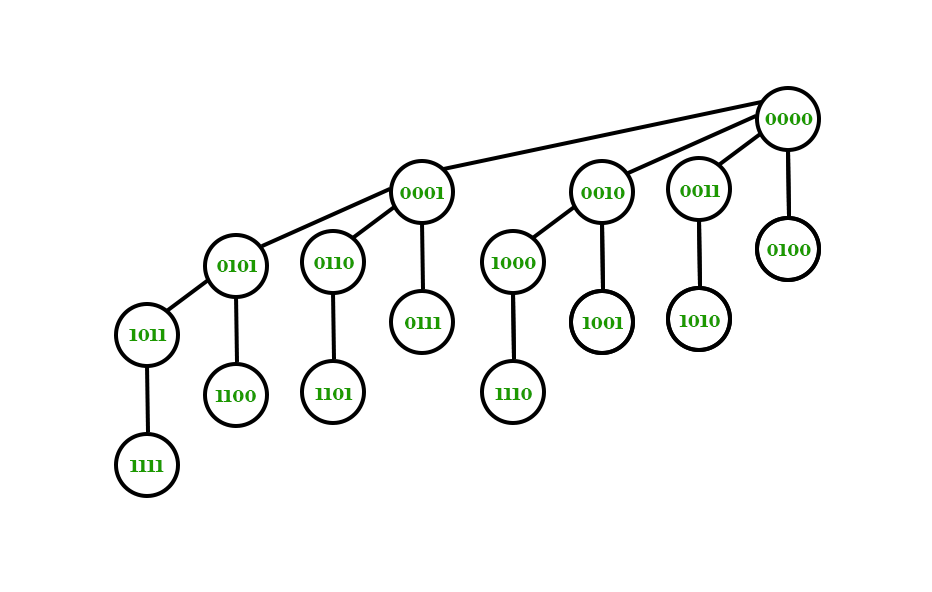
<style>
.page{position:relative;width:932px;height:592px;background:#ffffff}
.page>*{position:absolute;margin:0}
.t1{font:16px "Elephant-Regular";color:#1d9900}
</style>
<div class="page">
<p class="t1" style="left:765px;top:113px;width:48px;height:12px">0000</p>
<p class="t1" style="left:680px;top:185px;width:40px;height:12px">0011</p>
<p class="t1" style="left:400px;top:187px;width:44px;height:12px">0001</p>
<p class="t1" style="left:581px;top:187px;width:44px;height:12px">0010</p>
<p class="t1" style="left:767px;top:244px;width:44px;height:12px">0100</p>
<p class="t1" style="left:314px;top:257px;width:40px;height:12px">0110</p>
<p class="t1" style="left:491px;top:257px;width:45px;height:12px">1000</p>
<p class="t1" style="left:217px;top:260px;width:40px;height:12px">0101</p>
<p class="t1" style="left:405px;top:317px;width:37px;height:12px">0111</p>
<p class="t1" style="left:582px;top:317px;width:41px;height:12px">1001</p>
<p class="t1" style="left:679px;top:315px;width:41px;height:12px">1010</p>
<p class="t1" style="left:129px;top:329px;width:38px;height:12px">1011</p>
<p class="t1" style="left:215px;top:390px;width:41px;height:12px">1100</p>
<p class="t1" style="left:315px;top:388px;width:38px;height:12px">1101</p>
<p class="t1" style="left:495px;top:388px;width:37px;height:12px">1110</p>
<p class="t1" style="left:130px;top:460px;width:34px;height:12px">1111</p>
</div>
